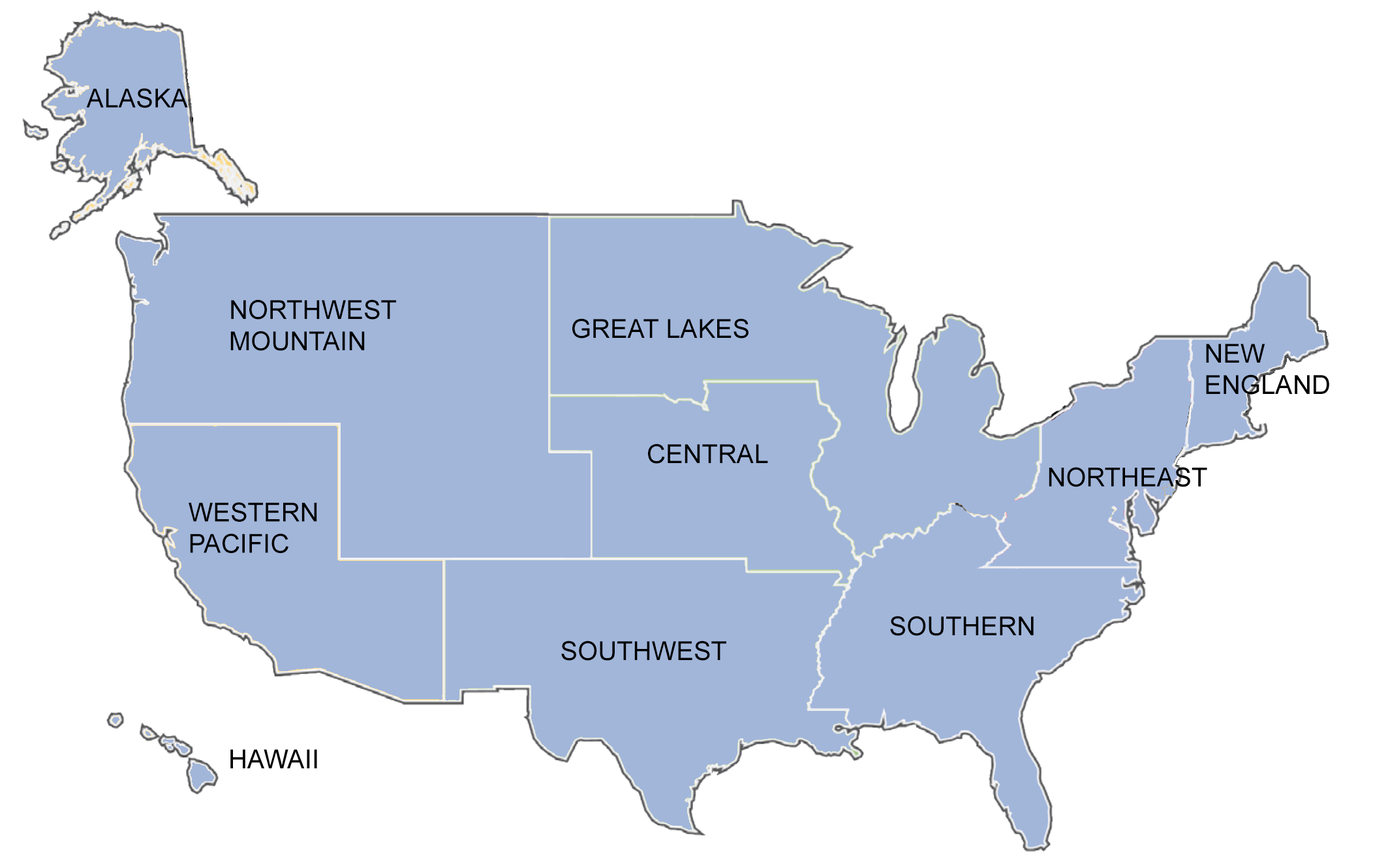
<style>
.page{position:relative;width:1388px;height:859px;background:#ffffff}
.page>*{position:absolute;margin:0}
.t1{font:26.1px "ArialMT";color:#000000}
</style>
<div class="page">
<p class="t1" style="left:86px;top:88px;width:102px;height:20px">ALASKA</p>
<p class="t1" style="left:230px;top:299px;width:166px;height:52px">NORTHWEST<br>MOUNTAIN</p>
<p class="t1" style="left:572px;top:318px;width:176px;height:21px">GREAT LAKES</p>
<p class="t1" style="left:1206px;top:344px;width:123px;height:51px">NEW<br>ENGLAND</p>
<p class="t1" style="left:648px;top:444px;width:120px;height:20px">CENTRAL</p>
<p class="t1" style="left:1048px;top:467px;width:159px;height:20px">NORTHEAST</p>
<p class="t1" style="left:189px;top:502px;width:128px;height:51px">WESTERN<br>PACIFIC</p>
<p class="t1" style="left:890px;top:616px;width:143px;height:20px">SOUTHERN</p>
<p class="t1" style="left:561px;top:641px;width:165px;height:20px">SOUTHWEST</p>
<p class="t1" style="left:230px;top:750px;width:87px;height:19px">HAWAII</p>
</div>
